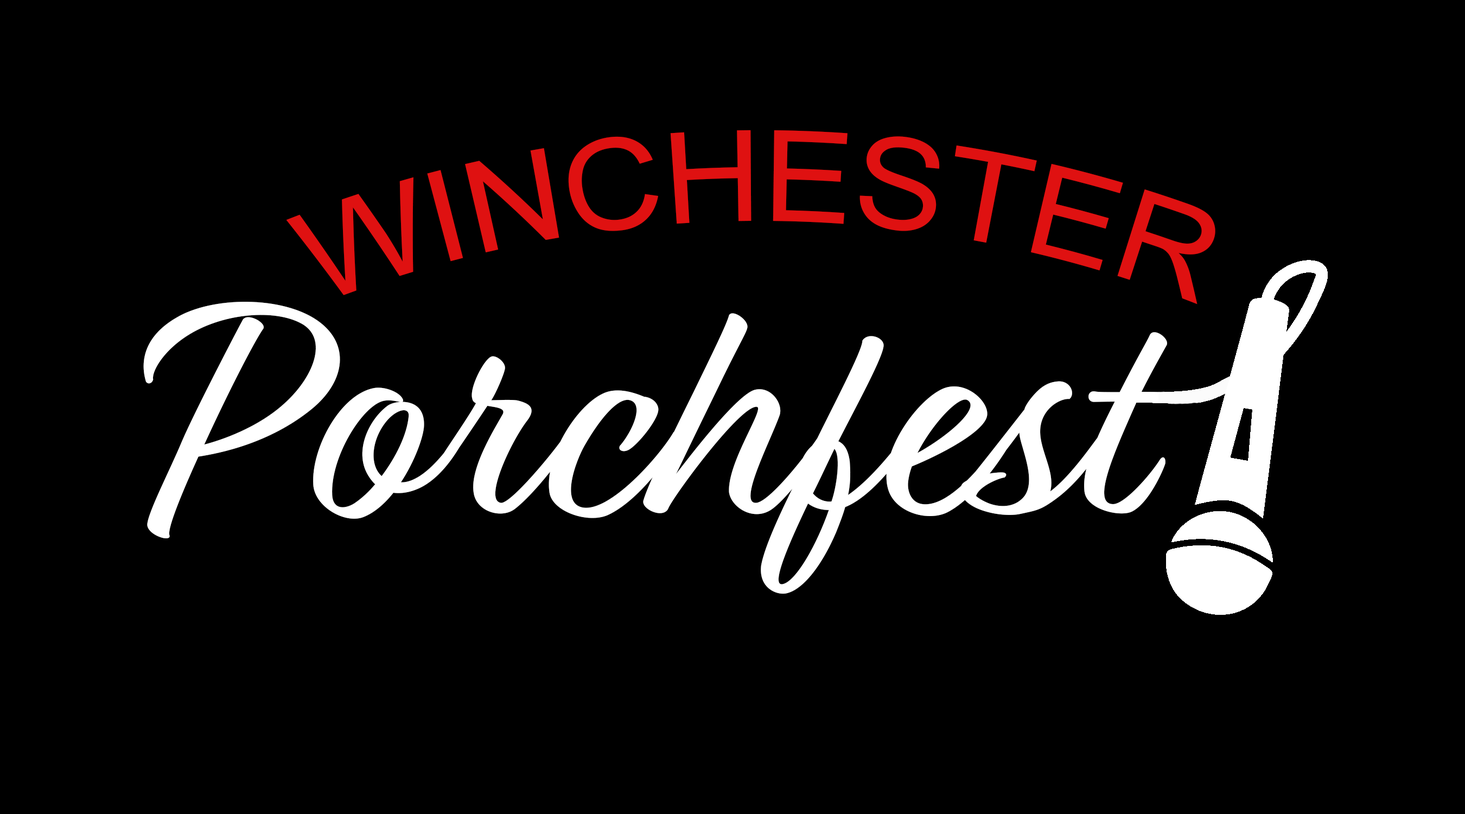
<style>
.page{position:relative;width:1465px;height:814px;background:#000000}
.page>*{position:absolute;margin:0}
.t1{font:126.6px "ArialMT";color:#df1111}
.t2{font:325.6px "Relation";color:#ffffff}
</style>
<div class="page">
<p class="t1" style="left:286px;top:130px;width:929px;height:174px">WINCHESTER</p>
<p class="t2" style="left:143px;top:302px;width:1030px;height:292px">Porchfest</p>
</div>
